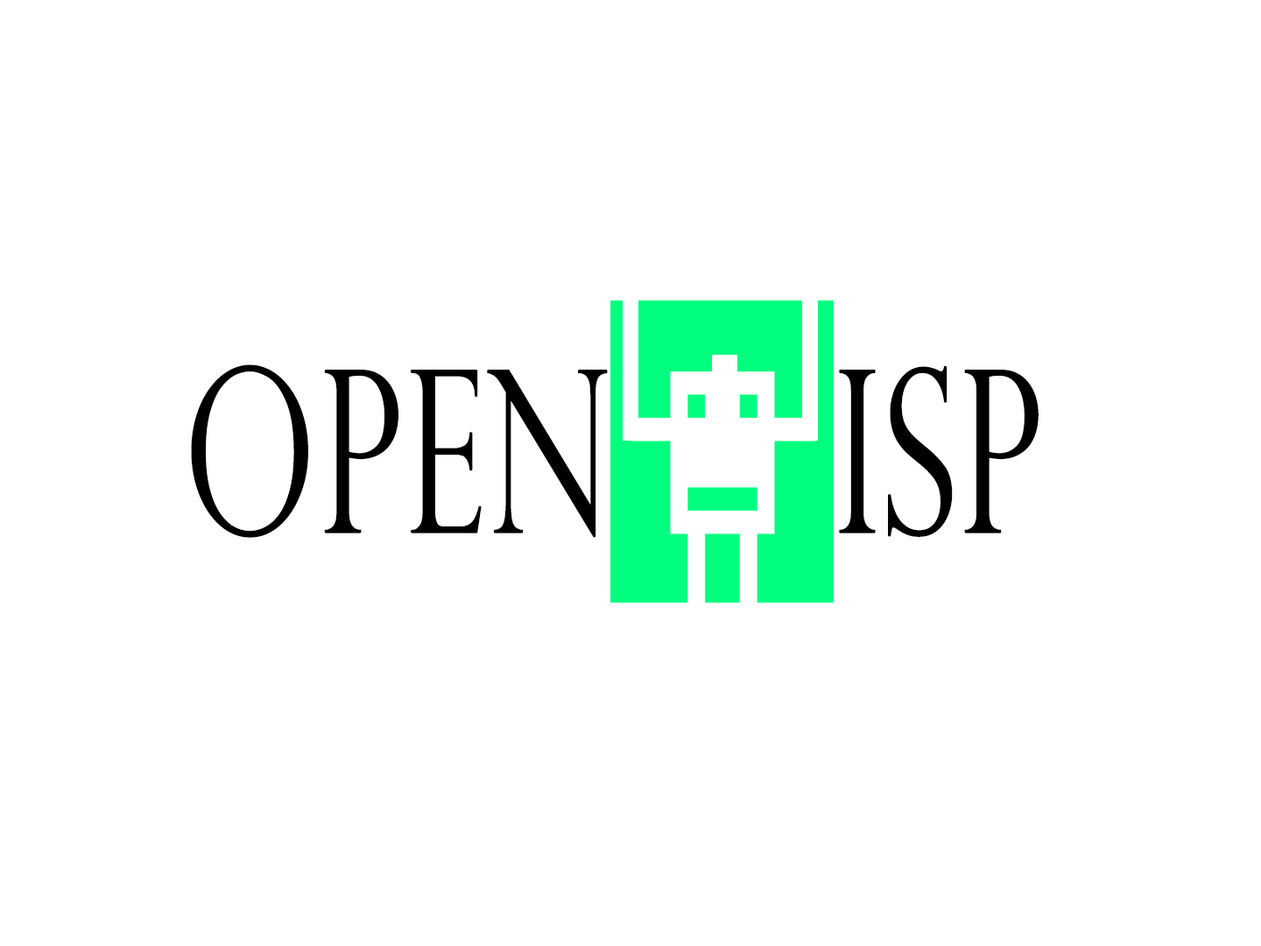
<style>
.page{position:relative;width:1261px;height:946px;background:#ffffff}
.page>*{position:absolute;margin:0}
.t1{font:225px "PerpetuaTitlingMT-Light";color:#000000;font-weight:bold;scale:0.68 1}
</style>
<div class="page">
<p class="t1" style="left:191px;top:364px;width:848px;height:174px">OPEN    ISP</p>
</div>
